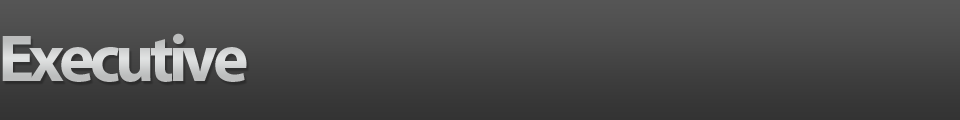
<style>
.page{position:relative;width:960px;height:120px}
.page>*{position:absolute;margin:0}
.t1{font:67.5px "MyriadPro-Bold";letter-spacing:-0.075em;color:#e0e2e2}
</style>
<div class="page">
<p class="t1" style="left:2px;top:33px;width:245px;height:49px">Executive</p>
</div>
